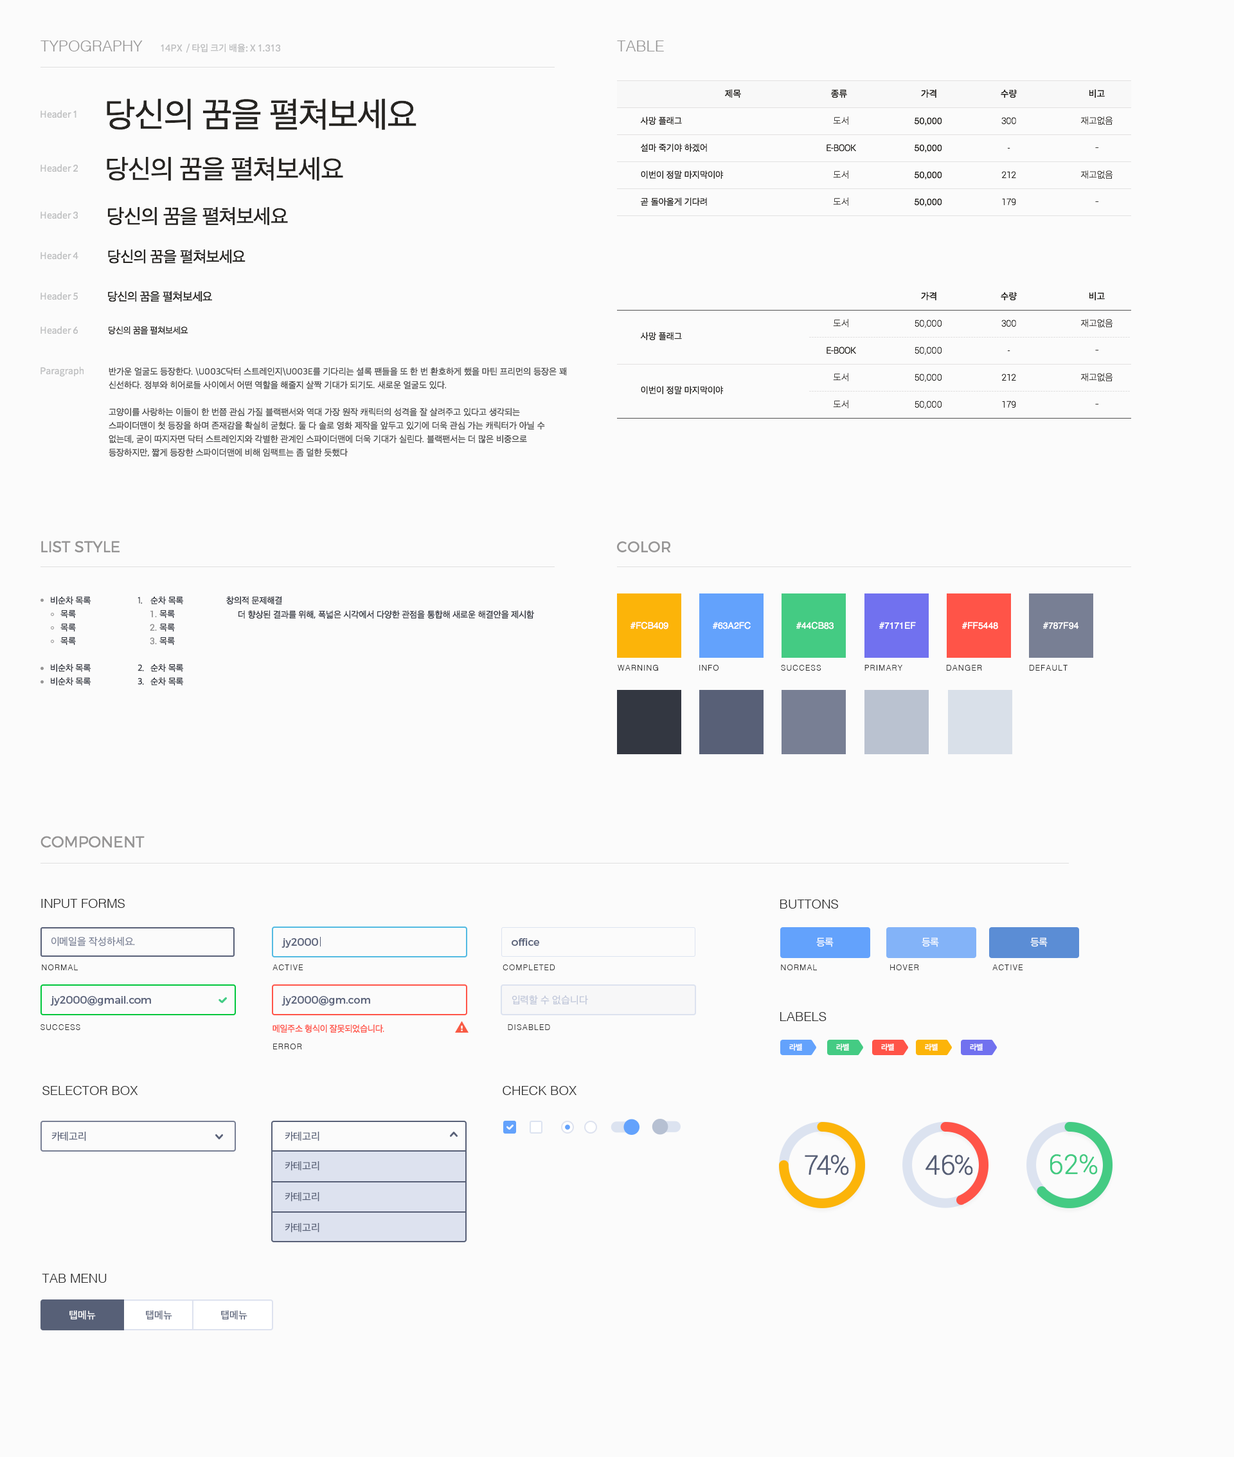
<style>
.page{position:relative;width:1234px;height:1457px;background:#fbfbfb}
.page>*{position:absolute;margin:0}
.t1{font:15.4px "Helvetica-Light";color:#969595;text-transform:uppercase}
.t2{font:9px "SpoqaHanSans-Regular";color:#c0c1c2;text-transform:uppercase}
.t3{font:9px "SpoqaHanSans-Regular";letter-spacing:-0.025em;color:#272522;text-transform:uppercase}
.t4{font:35.1px "AppleSDGothicNeo-Regular";letter-spacing:-0.025em;color:#272522;text-transform:uppercase}
.t5{font:9px "SpoqaHanSans-Regular";color:#c0c1c2}
.t6{font:9px "AppleSDGothicNeo-Regular";color:#272522;text-transform:uppercase}
.t7{font:9px "Roboto-Light";letter-spacing:-0.025em;color:#272522;text-transform:uppercase}
.t8{font:9px "SpoqaHanSans-Thin";letter-spacing:-0.025em;color:#272522;text-transform:uppercase}
.t9{font:9px "Helvetica";color:#272522;text-transform:uppercase}
.t10{font:26.7px "AppleSDGothicNeo-Regular";letter-spacing:-0.025em;color:#272522;text-transform:uppercase}
.t11{font:20.4px "AppleSDGothicNeo-Regular";letter-spacing:-0.025em;color:#272522;text-transform:uppercase}
.t12{font:15.5px "AppleSDGothicNeo-Regular";letter-spacing:-0.025em;color:#272522;text-transform:uppercase}
.t13{font:11.8px "AppleSDGothicNeo-Regular";letter-spacing:-0.025em;color:#272522;text-transform:uppercase}
.t14{font:9px "AppleSDGothicNeo-Regular";letter-spacing:-0.025em;color:#272522;text-transform:uppercase}
.t15{font:9px "Roboto-Light";color:#272522;text-transform:uppercase}
.t16{font:9px "AppleSDGothicNeo-Regular";color:#505050;text-transform:uppercase}
.t17{font:15.4px "Montserrat-Light";color:#969595;text-transform:uppercase}
.t18{font:15.4px "Montserrat-Regular";color:#969595;text-transform:uppercase}
.t19{font:9px "AppleSDGothicNeo-Regular";letter-spacing:-0.01em;color:#333741;text-transform:uppercase}
.t20{font:9px "Roboto-Regular";letter-spacing:-0.025em;color:#969595;text-transform:uppercase}
.t21{font:9px "Helvetica";color:#ffffff;text-transform:uppercase}
.t22{font:7.7px "Helvetica-Light";letter-spacing:0.1em;color:#2c2c2c;text-transform:uppercase}
.t23{font:12.9px "Helvetica-Light";color:#2c2c2c}
.t24{font:10.3px "AppleSDGothicNeo-Regular";color:#787f94}
.t25{font:10.3px "Montserrat-Regular";color:#586077}
.t26{font:10.3px "AppleSDGothicNeo-Regular";letter-spacing:-0.025em;color:#ffffff;text-transform:uppercase}
.t27{font:10.3px "AppleSDGothicNeo-Regular";color:#bfc6d9}
.t28{font:9px "AppleSDGothicNeo-Regular";letter-spacing:-0.025em;color:#ff5448}
.t29{font:7.7px "AppleSDGothicNeo-SemiBold";color:#ffffff;text-transform:uppercase}
.t30{font:10.3px "AppleSDGothicNeo-Regular";color:#586077}
.t31{font:27px "Roboto-Light";color:#586077}
.t32{font:27px "Roboto-Light";color:#44cb83}
.t33{font:10.3px/15.4px "AppleSDGothicNeo-Regular";color:#586077}
.t34{font:10.3px "AppleSDGothicNeo-Regular";color:#ffffff}
.t35{font:10.3px "AppleSDGothicNeo-Regular";color:#576077}
</style>
<div class="page">
<p class="t1" style="left:40px;top:40px;width:103px;height:11px">Typography</p>
<p class="t1" style="left:617px;top:40px;width:47px;height:11px">table</p>
<p class="t2" style="left:161px;top:43px;width:120px;height:10px">14PX  / 타입 크기 배율: x 1.313</p>
<p class="t3" style="left:725px;top:89px;width:16px;height:9px">제목</p>
<p class="t3" style="left:831px;top:89px;width:16px;height:9px">종류</p>
<p class="t3" style="left:921px;top:89px;width:16px;height:9px">가격</p>
<p class="t3" style="left:1001px;top:89px;width:16px;height:9px">수량</p>
<p class="t3" style="left:1089px;top:89px;width:16px;height:9px">비고</p>
<p class="t4" style="left:107px;top:98px;width:310px;height:32px">당신의 꿈을 펼쳐보세요</p>
<p class="t5" style="left:40px;top:110px;width:44px;height:267px">Header 1<br><br><br>Header 2<br><br><br>Header 3<br><br>Header 4<br><br>Header 5<br><br>Header 6<br><br>Paragraph</p>
<p class="t6" style="left:640px;top:116px;width:84px;height:90px">사망 플래그<br>설마 죽기야 하겠어<br>이번이 정말 마지막이야<br>곧 돌아올게 기다려</p>
<p class="t7" style="left:827px;top:116px;width:29px;height:90px;text-align:center"><span class="t8">도서<br></span>e-book<br><span class="t8">도서<br>도서</span></p>
<p class="t9" style="left:914px;top:117px;width:28px;height:89px">50,000<br>50,000<br>50,000<br>50,000</p>
<p class="t7" style="left:1002px;top:117px;width:14px;height:89px;text-align:center">300<br>-<br>212<br>179</p>
<p class="t8" style="left:1081px;top:116px;width:32px;height:87px;text-align:center">재고없음<br>-<br>재고없음<br>-</p>
<p class="t10" style="left:107px;top:157px;width:236px;height:24px">당신의 꿈을 펼쳐보세요</p>
<p class="t11" style="left:107px;top:206px;width:181px;height:20px">당신의 꿈을 펼쳐보세요</p>
<p class="t12" style="left:108px;top:249px;width:138px;height:15px">당신의 꿈을 펼쳐보세요</p>
<p class="t13" style="left:108px;top:291px;width:104px;height:11px">당신의 꿈을 펼쳐보세요</p>
<p class="t3" style="left:921px;top:292px;width:16px;height:8px">가격</p>
<p class="t3" style="left:1001px;top:292px;width:16px;height:8px">수량</p>
<p class="t3" style="left:1089px;top:292px;width:16px;height:8px">비고</p>
<p class="t14" style="left:108px;top:326px;width:80px;height:8px">당신의 꿈을 펼쳐보세요</p>
<p class="t7" style="left:827px;top:319px;width:29px;height:89px;text-align:center"><span class="t8">도서<br></span>e-book<br><span class="t8">도서<br>도서</span></p>
<p class="t15" style="left:915px;top:320px;width:27px;height:89px">50,000<br>50,000<br>50,000<br>50,000</p>
<p class="t7" style="left:1002px;top:320px;width:14px;height:88px;text-align:center">300<br>-<br>212<br>179</p>
<p class="t8" style="left:1081px;top:319px;width:32px;height:86px;text-align:center">재고없음<br>-<br>재고없음<br>-</p>
<p class="t6" style="left:640px;top:332px;width:84px;height:62px">사망 플래그<br><br>이번이 정말 마지막이야</p>
<p class="t16" style="left:109px;top:367px;width:458px;height:90px">반가운 얼굴도 등장한다. \u003c닥터 스트레인지\u003e를 기다리는 셜록 팬들을 또 한 번 환호하게 했을 마틴 프리먼의 등장은 꽤 신선하다. 정부와 히어로들 사이에서 어떤 역할을 해줄지 살짝 기대가 되기도. 새로운 얼굴도 있다. <br>고양이를 사랑하는 이들이 한 번쯤 관심 가질 블랙팬서와 역대 가장 원작 캐릭터의 성격을 잘 살려주고 있다고 생각되는 스파이더맨이 첫 등장을 하며 존재감을 확실히 굳혔다. 둘 다 솔로 영화 제작을 앞두고 있기에 더욱 관심 가는 캐릭터가 아닐 수 없는데, 굳이 따지자면 닥터 스트레인지와 각별한 관계인 스파이더맨에 더욱 기대가 실린다. 블랙팬서는 더 많은 비중으로 등장하지만, 짧게 등장한 스파이더맨에 비해 임팩트는 좀 덜한 듯했다</p>
<p class="t17" style="left:41px;top:541px;width:79px;height:12px">list style</p>
<p class="t18" style="left:617px;top:541px;width:54px;height:11px">color</p>
<p class="t19" style="left:51px;top:596px;width:40px;height:89px">비순차 목록<br><br><br>비순차 목록 <br>비순차 목록</p>
<p class="t19" style="left:138px;top:597px;width:6px;height:88px">1.<br><br><br>2.<br>3.</p>
<p class="t19" style="left:150px;top:596px;width:34px;height:90px">순차 목록<br><br><br>순차 목록 <br>순차 목록</p>
<p class="t19" style="left:226px;top:596px;width:56px;height:8px">창의적 문제해결</p>
<p class="t19" style="left:60px;top:609px;width:16px;height:36px">목록<br>목록<br>목록</p>
<p class="t20" style="left:150px;top:610px;width:7px;height:35px">1.<br>2.<br>3.</p>
<p class="t19" style="left:159px;top:609px;width:16px;height:36px">목록<br>목록<br>목록</p>
<p class="t19" style="left:238px;top:610px;width:296px;height:9px">더 향상된 결과를 위해, 폭넓은 시각에서 다양한 관점을 통합해 새로운 해결안을 제시함</p>
<p class="t21" style="left:630px;top:622px;width:39px;height:7px">#fcb409</p>
<p class="t21" style="left:712px;top:622px;width:39px;height:7px">#63a2fc</p>
<p class="t21" style="left:796px;top:622px;width:38px;height:7px">#44cb83</p>
<p class="t21" style="left:879px;top:622px;width:37px;height:7px">#7171ef</p>
<p class="t21" style="left:962px;top:622px;width:36px;height:7px">#ff5448</p>
<p class="t21" style="left:1043px;top:622px;width:36px;height:7px">#787f94</p>
<p class="t22" style="left:618px;top:665px;width:40px;height:5px">warning</p>
<p class="t22" style="left:699px;top:665px;width:20px;height:5px">info</p>
<p class="t22" style="left:781px;top:665px;width:41px;height:5px">success</p>
<p class="t22" style="left:865px;top:665px;width:38px;height:5px">primary</p>
<p class="t22" style="left:946px;top:665px;width:36px;height:5px">danger</p>
<p class="t22" style="left:1029px;top:665px;width:39px;height:5px">default</p>
<p class="t17" style="left:40px;top:836px;width:105px;height:12px">COMPONENT</p>
<p class="t23" style="left:41px;top:899px;width:84px;height:9px">INPUT FORMS</p>
<p class="t23" style="left:780px;top:899px;width:58px;height:9px">BUTTONS</p>
<p class="t24" style="left:51px;top:937px;width:84px;height:9px">이메일을 작성하세요.</p>
<p class="t25" style="left:282px;top:938px;width:36px;height:10px">jy2000</p>
<p class="t25" style="left:512px;top:938px;width:27px;height:8px">office</p>
<p class="t26" style="left:816px;top:937px;width:18px;height:10px">등록</p>
<p class="t26" style="left:922px;top:937px;width:17px;height:10px">등록</p>
<p class="t26" style="left:1030px;top:937px;width:18px;height:10px">등록</p>
<p class="t22" style="left:42px;top:964px;width:36px;height:6px">normal</p>
<p class="t22" style="left:273px;top:964px;width:30px;height:6px">Active</p>
<p class="t22" style="left:503px;top:964px;width:52px;height:6px">Completed</p>
<p class="t22" style="left:781px;top:964px;width:36px;height:6px">normal</p>
<p class="t22" style="left:890px;top:964px;width:29px;height:6px">hover</p>
<p class="t22" style="left:993px;top:964px;width:30px;height:6px">Active</p>
<p class="t25" style="left:50px;top:996px;width:101px;height:9px">jy2000@gmail.com</p>
<p class="t25" style="left:282px;top:996px;width:88px;height:9px">jy2000@gm.com</p>
<p class="t27" style="left:512px;top:995px;width:76px;height:10px">입력할 수 없습니다</p>
<p class="t23" style="left:780px;top:1012px;width:47px;height:9px">LABELS</p>
<p class="t22" style="left:40px;top:1024px;width:40px;height:6px">Success</p>
<p class="t28" style="left:273px;top:1024px;width:111px;height:9px">메일주소 형식이 잘못되었습니다.</p>
<p class="t22" style="left:508px;top:1024px;width:42px;height:6px">Disabled</p>
<p class="t22" style="left:273px;top:1043px;width:29px;height:6px">Error</p>
<p class="t29" style="left:789px;top:1043px;width:13px;height:8px">라벨</p>
<p class="t29" style="left:836px;top:1043px;width:13px;height:8px">라벨</p>
<p class="t29" style="left:881px;top:1043px;width:13px;height:8px">라벨</p>
<p class="t29" style="left:925px;top:1043px;width:13px;height:8px">라벨</p>
<p class="t29" style="left:970px;top:1043px;width:13px;height:8px">라벨</p>
<p class="t23" style="left:42px;top:1086px;width:96px;height:9px">SELECTOR BOX</p>
<p class="t23" style="left:503px;top:1086px;width:74px;height:9px">CHECK BOX</p>
<p class="t30" style="left:51px;top:1131px;width:35px;height:10px">카테고리</p>
<p class="t30" style="left:285px;top:1131px;width:35px;height:10px">카테고리</p>
<p class="t31" style="left:805px;top:1155px;width:44px;height:20px">74%</p>
<p class="t31" style="left:926px;top:1155px;width:47px;height:20px">46%</p>
<p class="t32" style="left:1050px;top:1154px;width:48px;height:20px">62%</p>
<p class="t33" style="left:285px;top:1161px;width:35px;height:71px">카테고리 <br><br>카테고리<br><br>카테고리</p>
<p class="t23" style="left:42px;top:1274px;width:65px;height:8px">TAB MENU</p>
<p class="t34" style="left:69px;top:1310px;width:27px;height:10px">탭메뉴</p>
<p class="t35" style="left:146px;top:1310px;width:26px;height:10px">탭메뉴</p>
<p class="t35" style="left:221px;top:1310px;width:27px;height:10px">탭메뉴</p>
</div>
